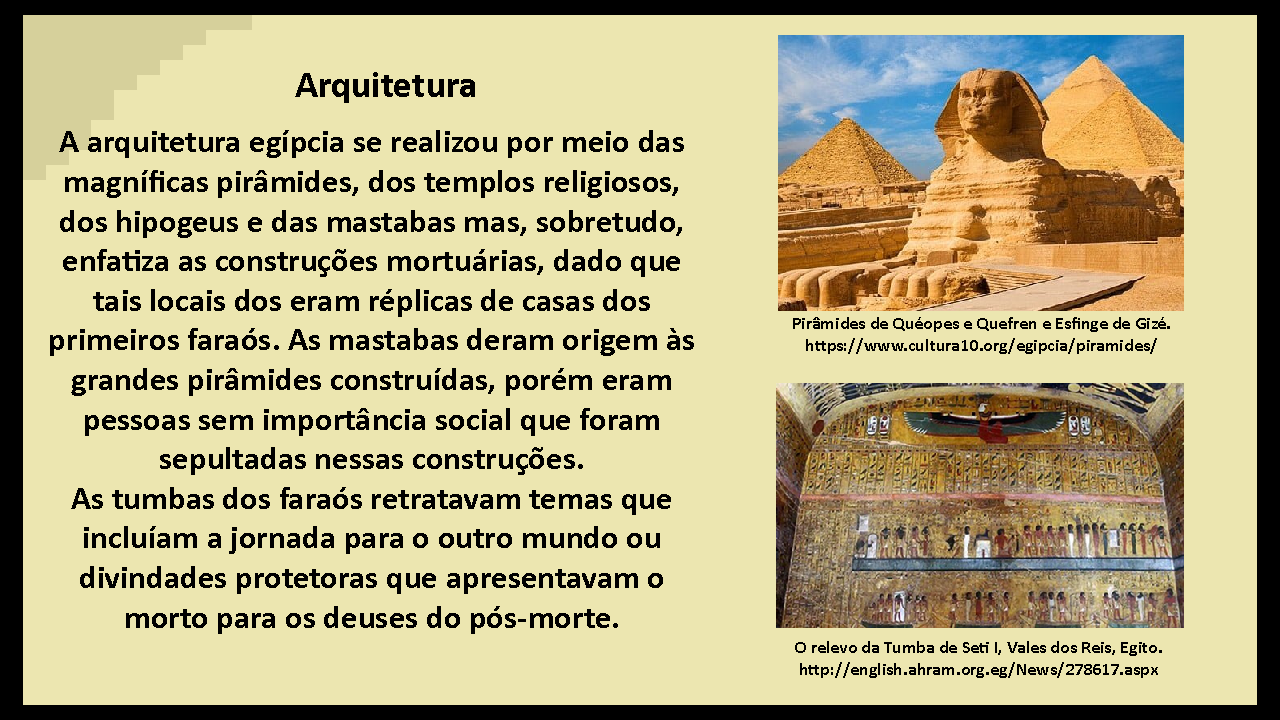
<style>
.page{position:relative;width:1280px;height:720px;background:#ece6b0}
.page>*{position:absolute;margin:0}
.t1{font:38px "Calibri-Bold";color:#000000}
.t2{font:33px "Calibri-Bold";color:#000000}
.t3{font:18px "Calibri-Bold";color:#000000}
</style>
<div class="page">
<p class="t1" style="left:295px;top:72px;width:180px;height:31px">Arquitetura</p>
<p class="t2" style="left:50px;top:130px;width:644px;height:504px;text-align:center">A arquitetura egípcia se realizou por meio das magníficas pirâmides, dos templos religiosos, dos hipogeus e das mastabas mas, sobretudo, enfatiza as construções mortuárias, dado que tais locais dos eram réplicas de casas dos primeiros faraós. As mastabas deram origem às grandes pirâmides construídas, porém eram pessoas sem importância social que foram sepultadas nessas construções.<br>As tumbas dos faraós retratavam temas que incluíam a jornada para o outro mundo ou divindades protetoras que apresentavam o morto para os deuses do pós-morte.</p>
<p class="t3" style="left:793px;top:317px;width:377px;height:37px;text-align:center">Pirâmides de Quéopes e Quefren e Esfinge de Gizé.<br>https://www.cultura10.org/egipcia/piramides/</p>
<p class="t3" style="left:795px;top:641px;width:367px;height:37px;text-align:center">O relevo da Tumba de Seti I, Vales dos Reis, Egito.<br>http://english.ahram.org.eg/News/278617.aspx</p>
</div>
